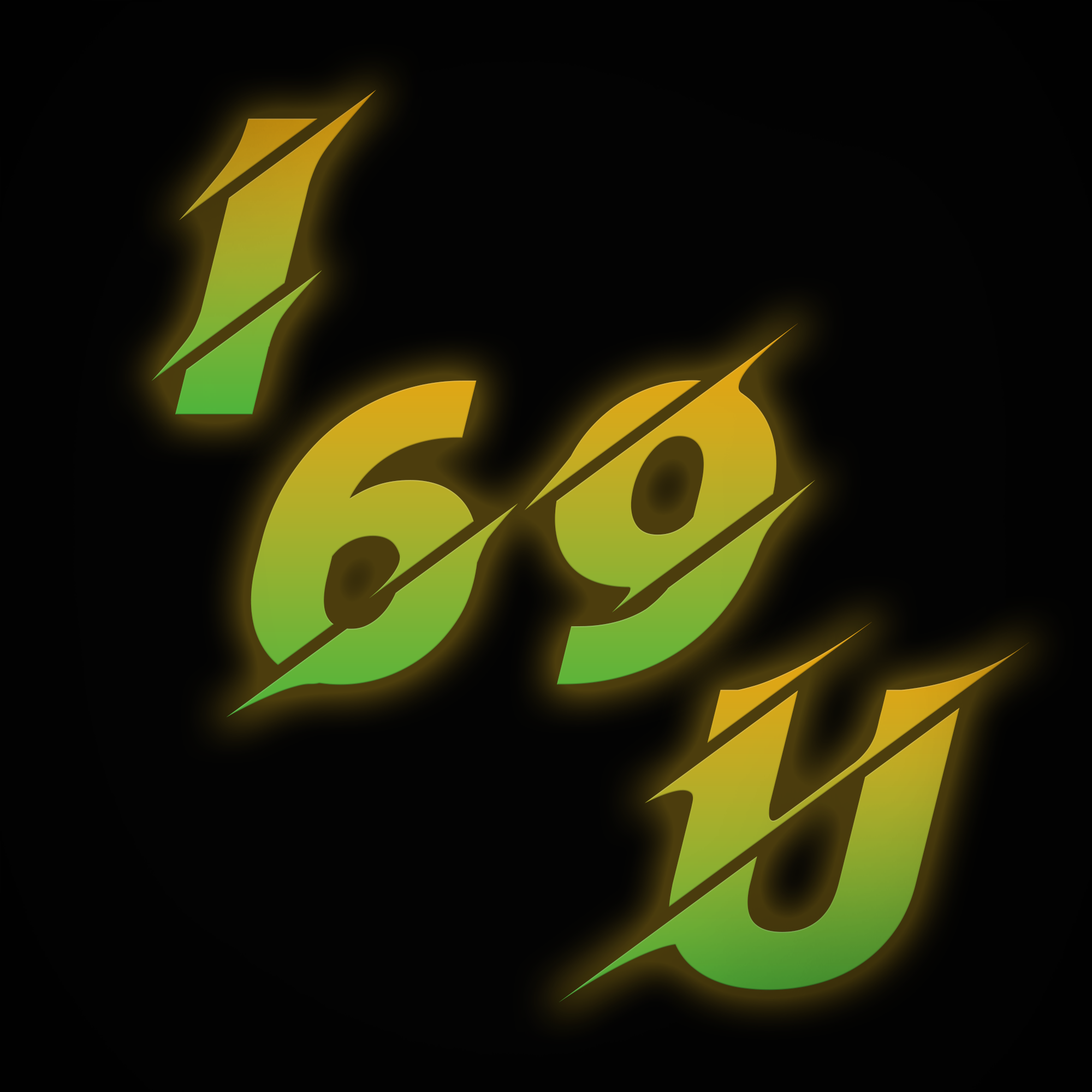
<style>
.page{position:relative;width:1092px;height:1092px;background:#030303}
.page>*{position:absolute;margin:0}
.t1{font:412.8px "Facon"}
</style>
<div class="page">
<p class="t1" style="left:151px;top:90px;width:225px;height:324px">I</p>
<p class="t1" style="left:226px;top:323px;width:589px;height:394px">69</p>
<p class="t1" style="left:559px;top:622px;width:470px;height:380px">U</p>
</div>
